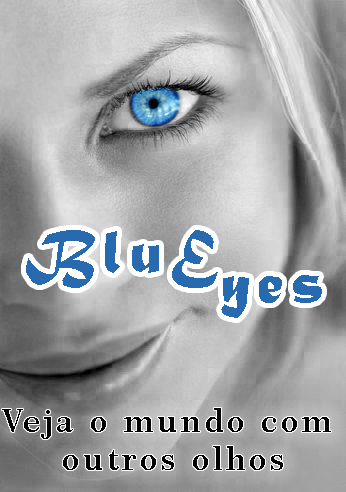
<style>
.page{position:relative;width:346px;height:492px}
.page>*{position:absolute;margin:0}
.t1{font:32px "Century751BT-SemiBold";letter-spacing:0.11em;color:#000000}
</style>
<div class="page">
<p class="t1" style="left:2px;top:408px;width:329px;height:62px;text-align:center">Veja o mundo com<br> outros olhos</p>
</div>
